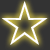
<style>
.page{position:relative;width:50px;height:50px;background:#333333}
.page>*{position:absolute;margin:0}
.t1{font:54.2px "BinggraeMelona";color:#ffffff}
</style>
<div class="page">
<p class="t1" style="left:2px;top:1px;width:46px;height:44px">☆</p>
</div>
